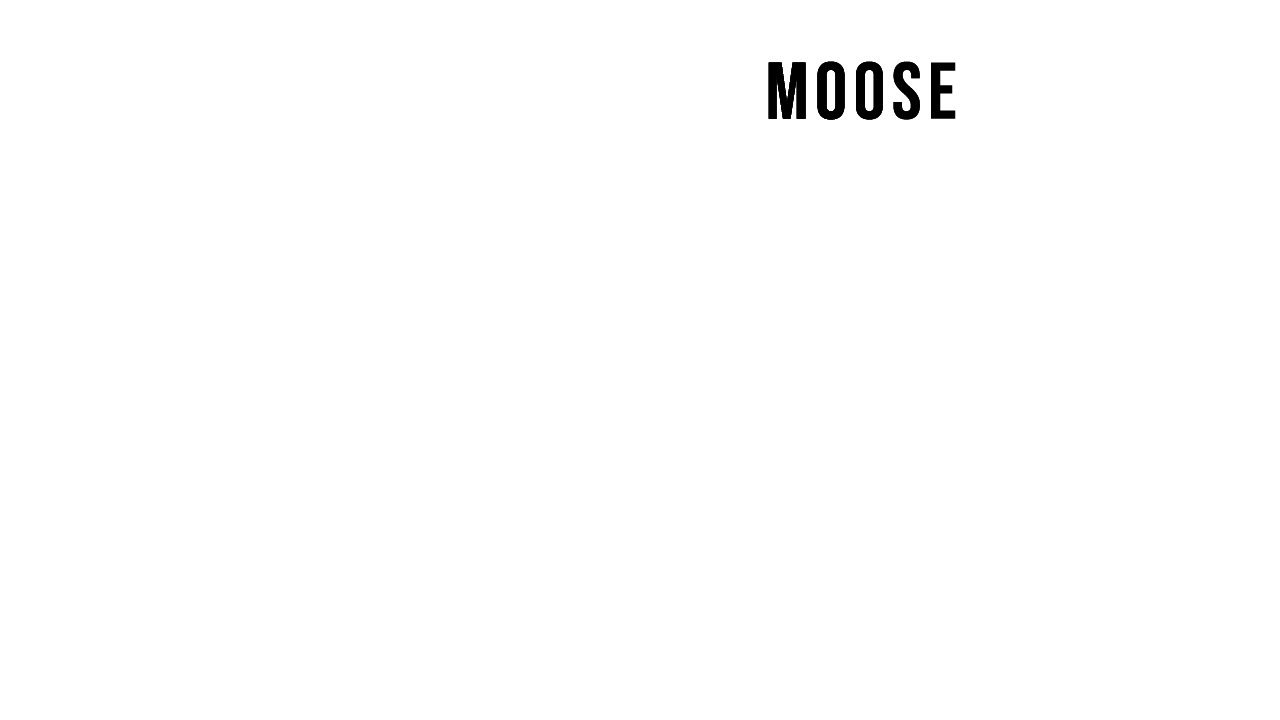
<style>
.page{position:relative;width:1280px;height:720px;background:#ffffff}
.page>*{position:absolute;margin:0}
.t1{font:80px "BebasNeue-Regular";letter-spacing:0.08em;color:#000000}
</style>
<div class="page">
<p class="t1" style="left:768px;top:61px;width:77px;height:59px">Mo</p>
<p class="t1" style="left:768px;top:61px;width:115px;height:59px">Moo</p>
<p class="t1" style="left:768px;top:61px;width:152px;height:59px">Moos</p>
<p class="t1" style="left:768px;top:61px;width:188px;height:59px">MoosE</p>
</div>
